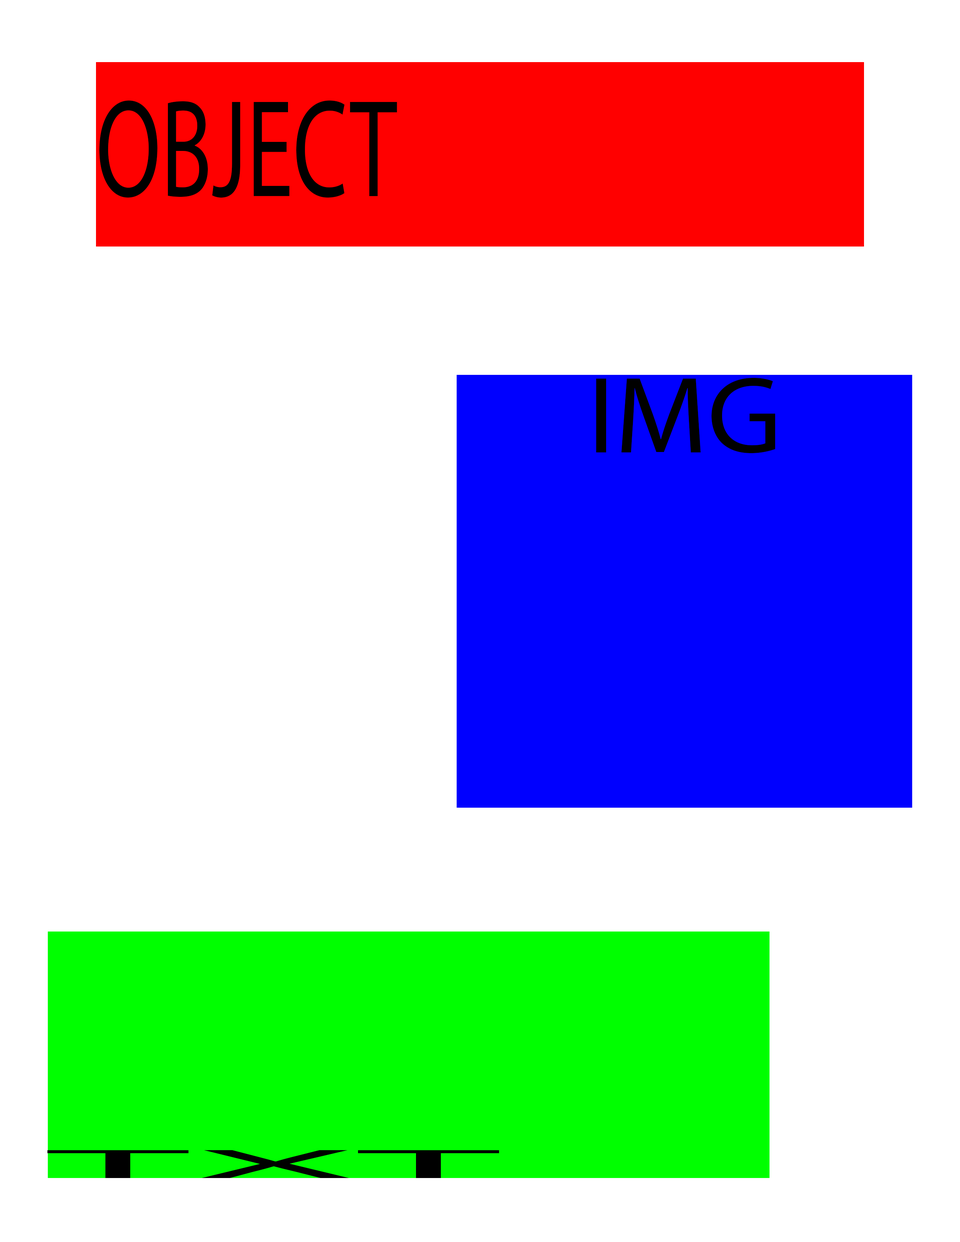
<style>
.page{position:relative;width:960px;height:1242px;background:#ffffff}
.page>*{position:absolute;margin:0}
.t1{font:139.7px "MyriadPro-Regular";color:#000000;scale:0.67 1}
.t2{font:109.3px "MyriadPro-Regular";color:#000000;scale:1.05 1}
.t3{font:41.3px "MyriadPro-Regular";color:#000000;scale:6.85 1}
</style>
<div class="page">
<p class="t1" style="left:99px;top:101px;width:298px;height:97px">OBJECT</p>
<p class="t2" style="left:596px;top:378px;width:179px;height:76px">IMG</p>
<p class="t3" style="left:47px;top:1150px;width:452px;height:28px">TXT</p>
</div>
